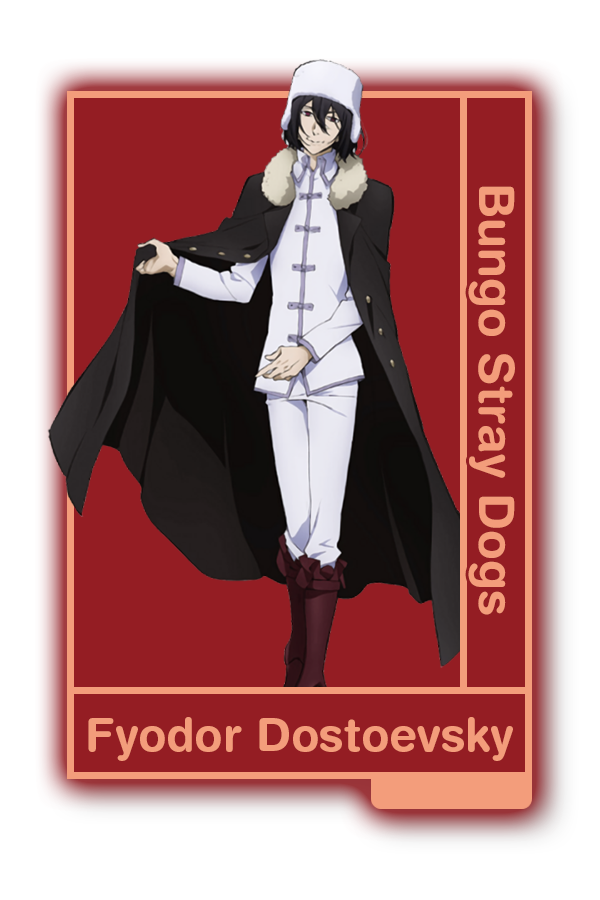
<style>
.page{position:relative;width:600px;height:900px;background:#941d23}
.page>*{position:absolute;margin:0}
.t1{font:48.8px "HelveticaRounded-Bold";color:#f39d7b}
.t2{font:46.2px "HelveticaRounded-Bold";color:#f39d7b}
</style>
<div class="page">
<p class="t1" style="left:468px;top:186px;width:47px;height:429px;rotate:90deg">Bungo Stray Dogs</p>
<p class="t2" style="left:88px;top:717px;width:425px;height:44px">Fyodor Dostoevsky</p>
</div>
